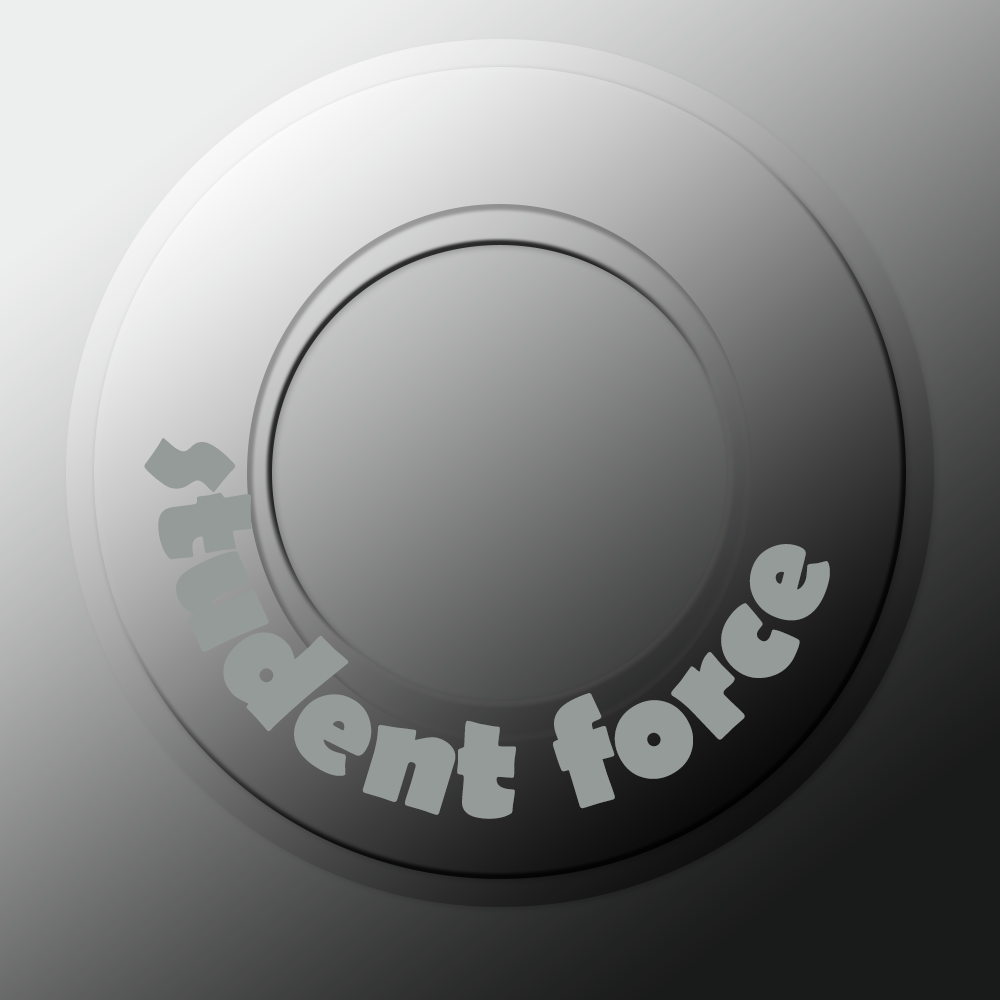
<style>
.page{position:relative;width:1000px;height:1000px}
.page>*{position:absolute;margin:0}
.t1{font:150px "BerlinSansFB-Bold";letter-spacing:0.06em;color:#959b98}
</style>
<div class="page">
<p class="t1" style="left:144px;top:438px;width:686px;height:381px">student force</p>
</div>
